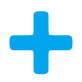
<style>
.page{position:relative;width:82px;height:82px;background:#ffffff}
.page>*{position:absolute;margin:0}
.t1{font:130px "CooperBlackStd";letter-spacing:-0.02em;color:#00aeef}
</style>
<div class="page">
<p class="t1" style="left:9px;top:11px;width:64px;height:64px">+</p>
</div>
